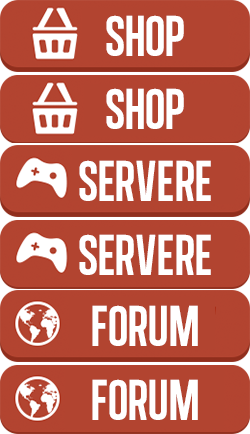
<style>
.page{position:relative;width:250px;height:434px;background:#b24430}
.page>*{position:absolute;margin:0}
.t1{font:58.9px "AlgreSansNC";color:#ffffff}
</style>
<div class="page">
<p class="t1" style="left:106px;top:15px;width:78px;height:41px">SHOP</p>
<p class="t1" style="left:106px;top:88px;width:78px;height:41px">SHOP</p>
<p class="t1" style="left:79px;top:160px;width:132px;height:41px">SERVERE</p>
<p class="t1" style="left:79px;top:234px;width:132px;height:41px">SERVERE</p>
<p class="t1" style="left:92px;top:305px;width:106px;height:41px">FORUM</p>
<p class="t1" style="left:92px;top:379px;width:106px;height:41px">FORUM</p>
</div>
